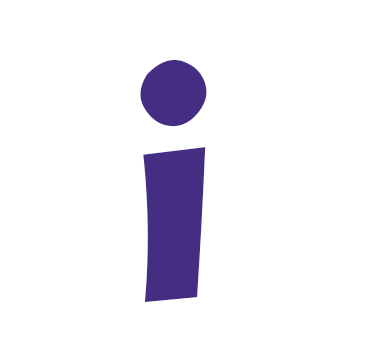
<style>
.page{position:relative;width:380px;height:364px;background:#ffffff}
.page>*{position:absolute;margin:0}
.t1{font:416.7px "BradyBunchRemastered";color:#452d83}
</style>
<div class="page">
<p class="t1" style="left:140px;top:60px;width:67px;height:242px">i</p>
</div>
